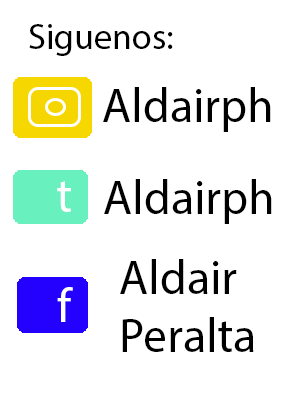
<style>
.page{position:relative;width:290px;height:400px;background:#ffffff}
.page>*{position:absolute;margin:0}
.t1{font:36px "MyriadPro-Regular";color:#000000}
.t2{font:48px "MyriadPro-Regular";color:#000000}
.t3{font:48px "MyriadPro-Regular";color:#ffffff}
</style>
<div class="page">
<p class="t1" style="left:29px;top:24px;width:144px;height:32px">Siguenos:</p>
<p class="t2" style="left:103px;top:87px;width:168px;height:45px">Aldairph</p>
<p class="t3" style="left:57px;top:181px;width:14px;height:31px">t</p>
<p class="t2" style="left:104px;top:179px;width:168px;height:45px">Aldairph</p>
<p class="t2" style="left:120px;top:259px;width:134px;height:93px">Aldair <br>Peralta</p>
<p class="t3" style="left:57px;top:287px;width:16px;height:35px">f</p>
</div>
